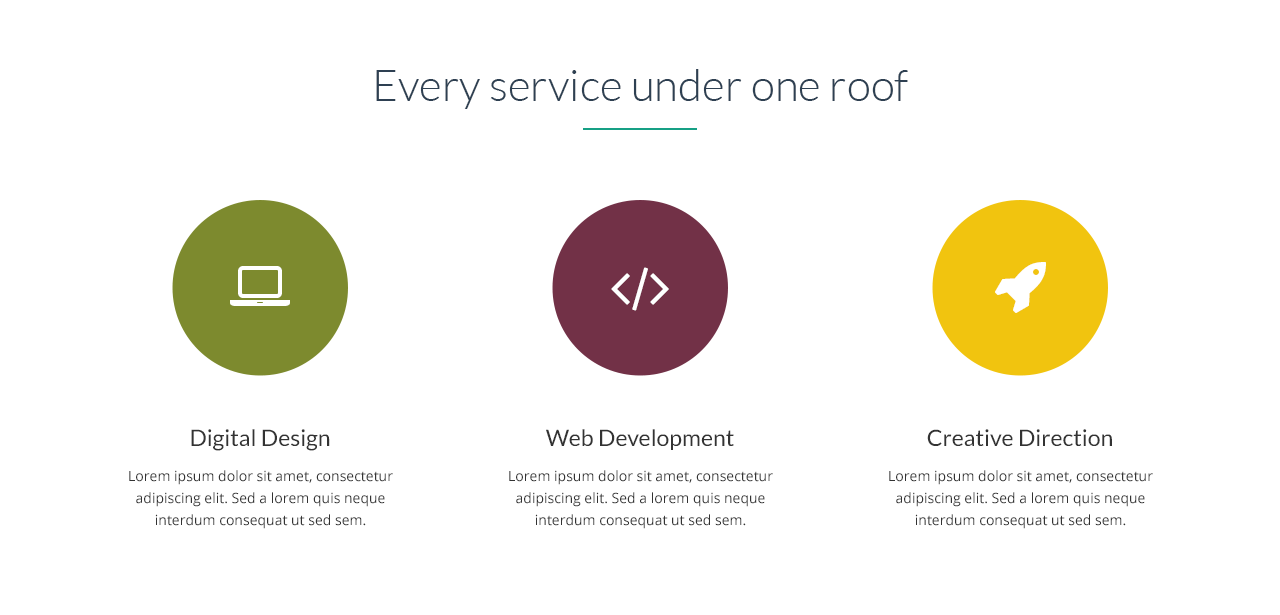
<style>
.page{position:relative;width:1280px;height:615px;background:#ffffff}
.page>*{position:absolute;margin:0}
.t1{font:44px "Lato-Light";color:#2e4052}
.t2{font:23px "Lato-Regular";color:#333333}
.t3{font:14px/22px "OpenSans";color:#333333}
</style>
<div class="page">
<p class="t1" style="left:376px;top:69px;width:532px;height:40px">Every service under one roof</p>
<p class="t2" style="left:191px;top:429px;width:139px;height:22px">Digital Design</p>
<p class="t2" style="left:546px;top:429px;width:188px;height:21px">Web Development</p>
<p class="t2" style="left:927px;top:429px;width:185px;height:17px">Creative Direction</p>
<p class="t3" style="left:129px;top:470px;width:264px;height:59px;text-align:center">Lorem ipsum dolor sit amet, consectetur adipiscing elit. Sed a lorem quis neque interdum consequat ut sed sem.</p>
<p class="t3" style="left:509px;top:470px;width:264px;height:59px;text-align:center">Lorem ipsum dolor sit amet, consectetur adipiscing elit. Sed a lorem quis neque interdum consequat ut sed sem.</p>
<p class="t3" style="left:889px;top:470px;width:264px;height:59px;text-align:center">Lorem ipsum dolor sit amet, consectetur adipiscing elit. Sed a lorem quis neque interdum consequat ut sed sem.</p>
</div>
